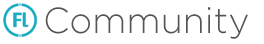
<style>
.page{position:relative;width:264px;height:44px;background:#ffffff}
.page>*{position:absolute;margin:0}
.t1{font:36px "Gotham-Light";color:#555555}
</style>
<div class="page">
<p class="t1" style="left:45px;top:7px;width:203px;height:32px">Community</p>
</div>
